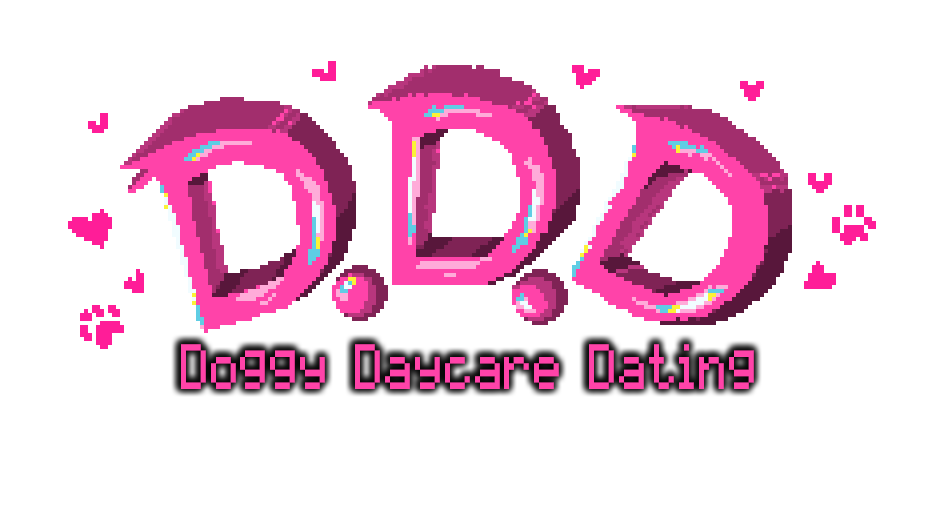
<style>
.page{position:relative;width:925px;height:518px;background:#ffffff}
.page>*{position:absolute;margin:0}
.t1{font:51.1px "pixelmix";letter-spacing:0.005em;color:#ff43a9;scale:0.77 1}
</style>
<div class="page">
<p class="t1" style="left:181px;top:344px;width:573px;height:45px">Doggy Daycare Dating</p>
</div>
